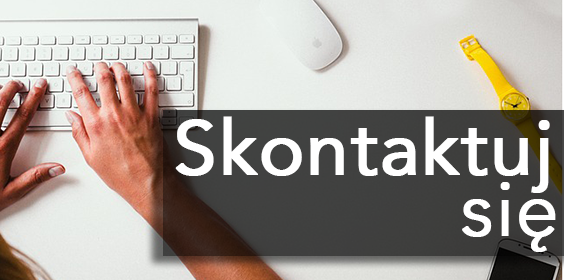
<style>
.page{position:relative;width:564px;height:280px}
.page>*{position:absolute;margin:0}
.t1{font:76.2px "Avenir-Roman";color:#ffffff;font-weight:bold}
.t2{font:76.2px "Avenir-Light";color:#ffffff;font-weight:bold}
</style>
<div class="page">
<p class="t1" style="left:175px;top:116px;width:375px;height:77px">Skontaktuj</p>
<p class="t2" style="left:462px;top:182px;width:94px;height:70px">się</p>
</div>
